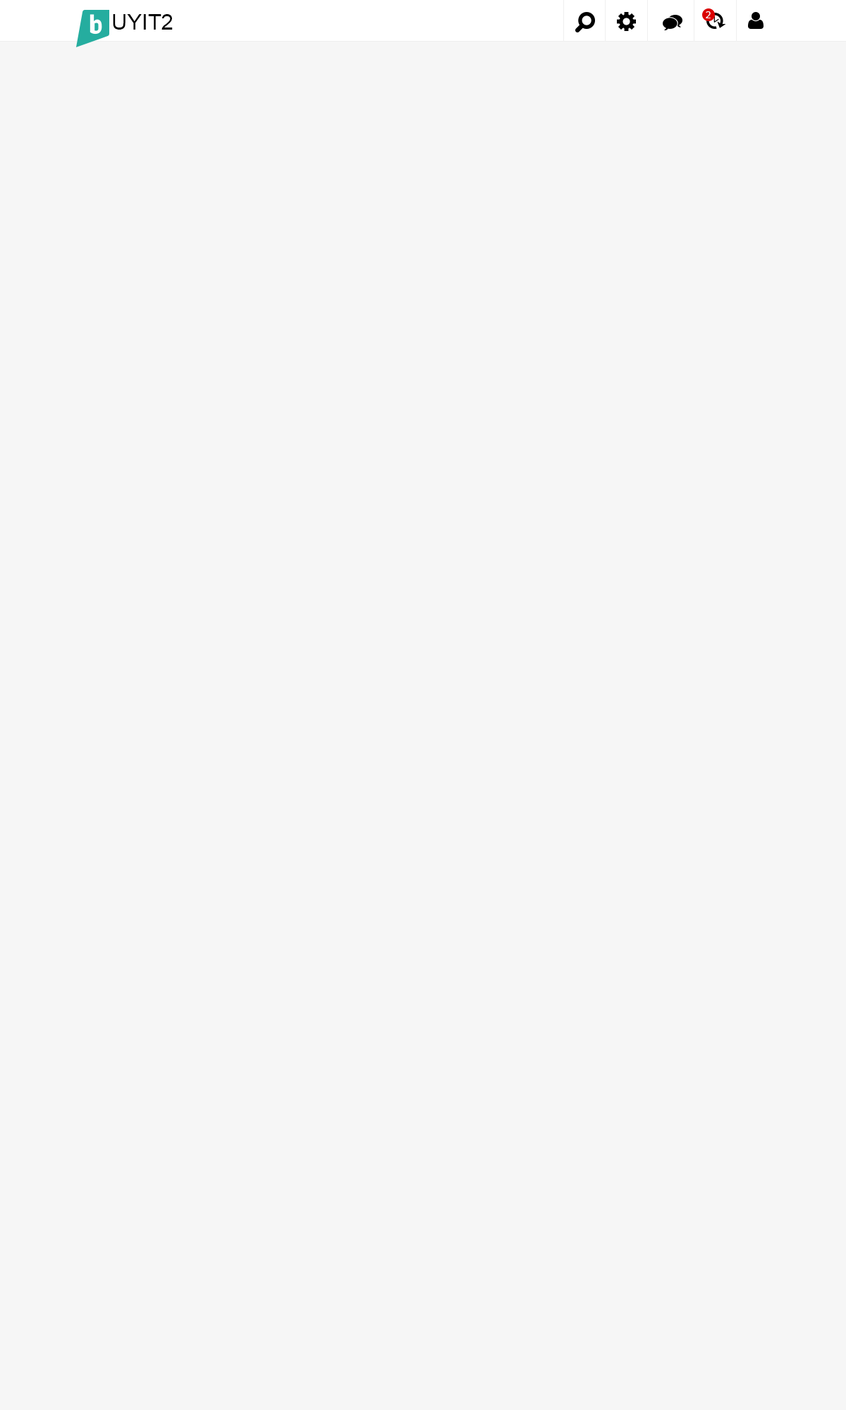
<style>
.page{position:relative;width:846px;height:1410px;background:#f6f6f6}
.page>*{position:absolute;margin:0}
.t1{font:21.9px "ArialMT";color:#000000}
.t2{font:8.9px "ArialMT";color:#f6f6f6}
</style>
<div class="page">
<p class="t1" style="left:113px;top:14px;width:60px;height:16px">UYIT2</p>
<p class="t2" style="left:706px;top:11px;width:5px;height:7px">2</p>
</div>
